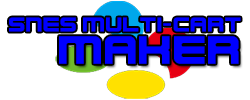
<style>
.page{position:relative;width:250px;height:100px;background:#ffffff}
.page>*{position:absolute;margin:0}
.t1{font:20.8px "NES-Logo";color:#0000ff}
.t2{font:41.7px "NES-Logo";color:#0000ff}
</style>
<div class="page">
<p class="t1" style="left:9px;top:17px;width:232px;height:15px">SNES MULTI-CART</p>
<p class="t2" style="left:59px;top:36px;width:180px;height:28px">MAKER</p>
</div>
